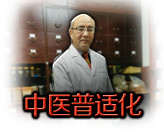
<style>
.page{position:relative;width:164px;height:140px}
.page>*{position:absolute;margin:0}
.t1{font:25.2px "FZZZHUNHJW--GB1-0";letter-spacing:-0.06em}
</style>
<div class="page">
<p class="t1" style="left:25px;top:93px;width:117px;height:24px">中医普适化</p>
</div>
